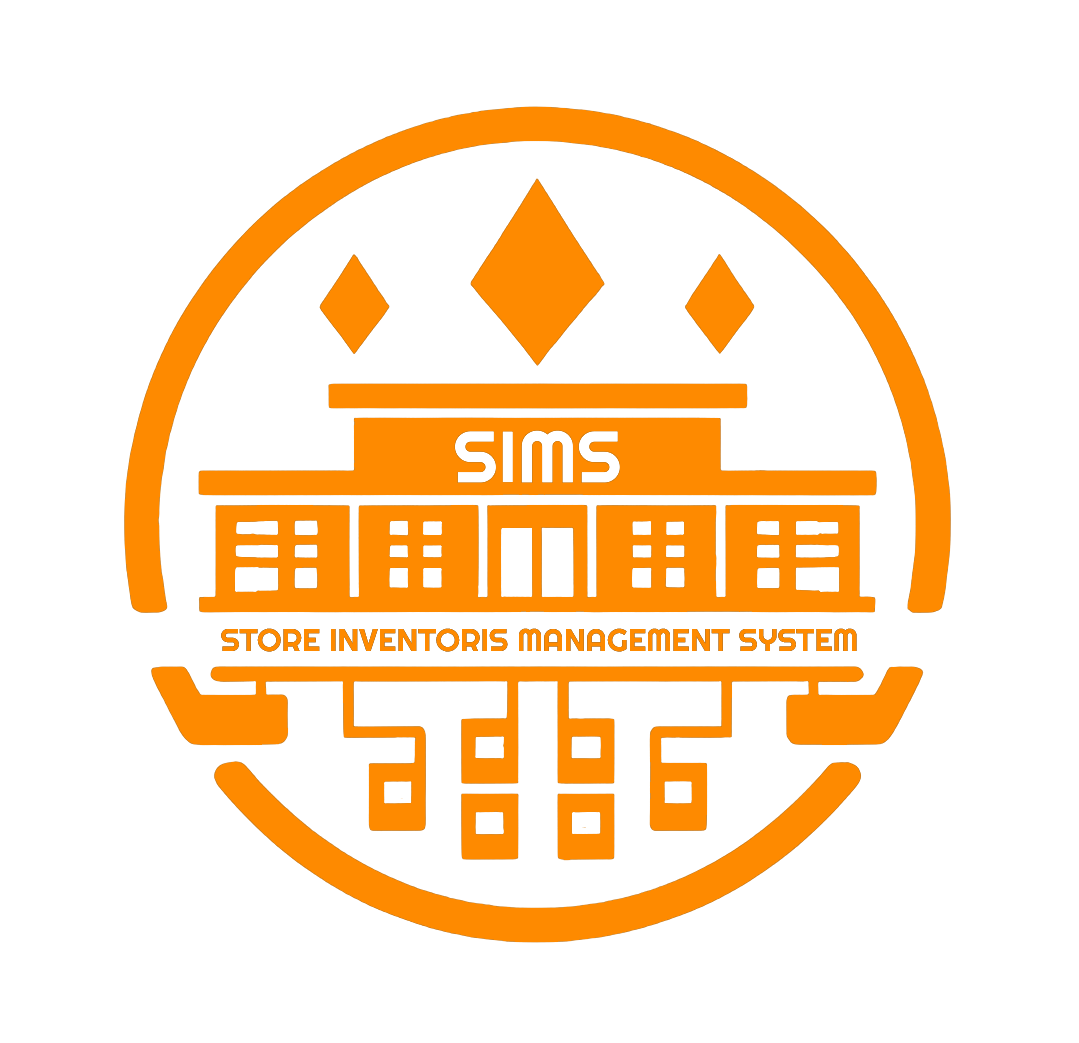
<style>
.page{position:relative;width:1079px;height:1043px;background:#ffffff}
.page>*{position:absolute;margin:0}
.t1{font:31.5px "Righteous-Regular";color:#fe8a00}
</style>
<div class="page">
<p class="t1" style="left:221px;top:628px;width:636px;height:24px">STORE INVENTORIS MANAGEMENT SYSTEM</p>
</div>
